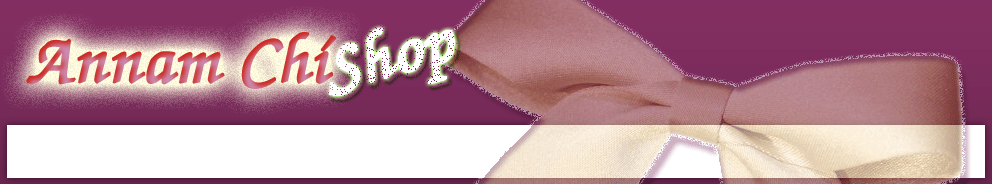
<style>
.page{position:relative;width:992px;height:184px}
.page>*{position:absolute;margin:0}
.t1{font:72px "ThaHuong11";color:#ffffff;font-weight:bold}
.t2{font:72px "ThaHuong11";font-weight:bold}
</style>
<div class="page">
<p class="t1" style="left:329px;top:28px;width:126px;height:68px;rotate:-16deg;opacity:0.93">Shop</p>
<p class="t2" style="left:26px;top:32px;width:310px;height:57px">Annam Chí</p>
</div>
